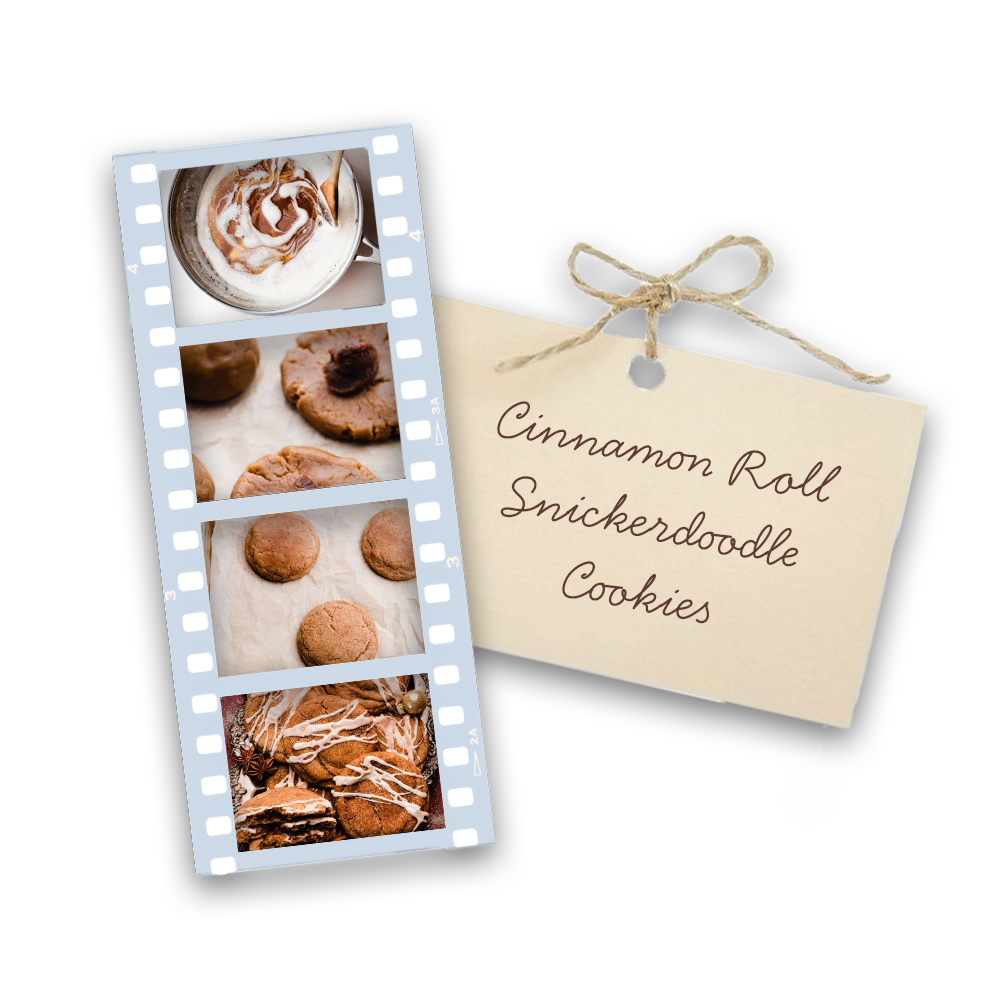
<style>
.page{position:relative;width:1000px;height:1000px;background:#ffffff}
.page>*{position:absolute;margin:0}
.t1{font:60px "HandsomePro";color:#5e3b35}
</style>
<div class="page">
<p class="t1" style="left:497px;top:401px;width:345px;height:223px;rotate:11deg">Cinnamon Roll Snickerdoodle Cookies</p>
</div>
